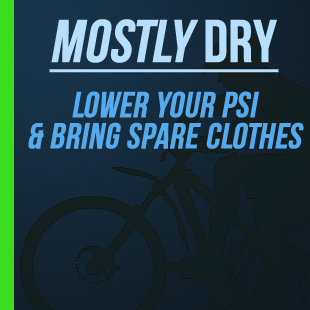
<style>
.page{position:relative;width:310px;height:310px}
.page>*{position:absolute;margin:0}
.t1{font:36px "BebasNeue";color:#55aaec;font-weight:bold;font-style:italic}
.t2{font:60px "BebasNeue";color:#b6dffe;font-weight:bold;font-style:italic;text-decoration:underline}
.t3{font:60px "BebasNeue";color:#b6dffe;font-weight:bold;text-decoration:underline}
</style>
<div class="page">
<p class="t1" style="left:28px;top:19px;width:276px;height:130px;text-align:center"><span class="t2">Mostly</span><span class="t3"> dry<br></span>Lower your PSI<br>&amp; Bring Spare Clothes</p>
</div>
